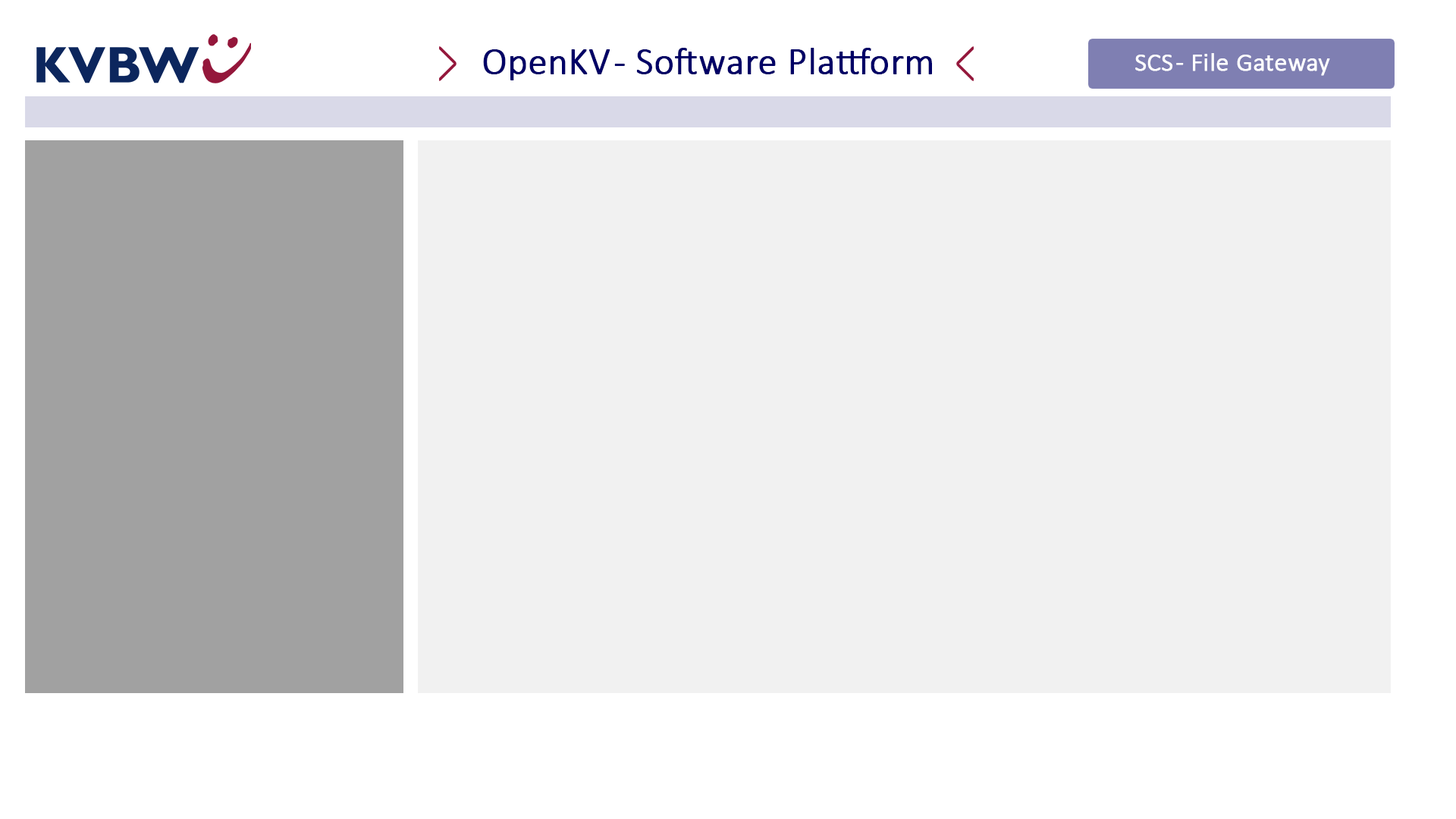
<style>
.page{position:relative;width:1456px;height:819px;background:#f1f1f1}
.page>*{position:absolute;margin:0}
.t1{font:37.9px "Calibri-Light";color:#000066;font-weight:bold}
.t2{font:25.8px "Calibri-Light";color:#ffffff;font-weight:bold}
</style>
<div class="page">
<p class="t1" style="left:483px;top:48px;width:449px;height:32px">OpenKV - Software Plattform</p>
<p class="t2" style="left:1135px;top:53px;width:195px;height:23px">SCS - File Gateway</p>
</div>
